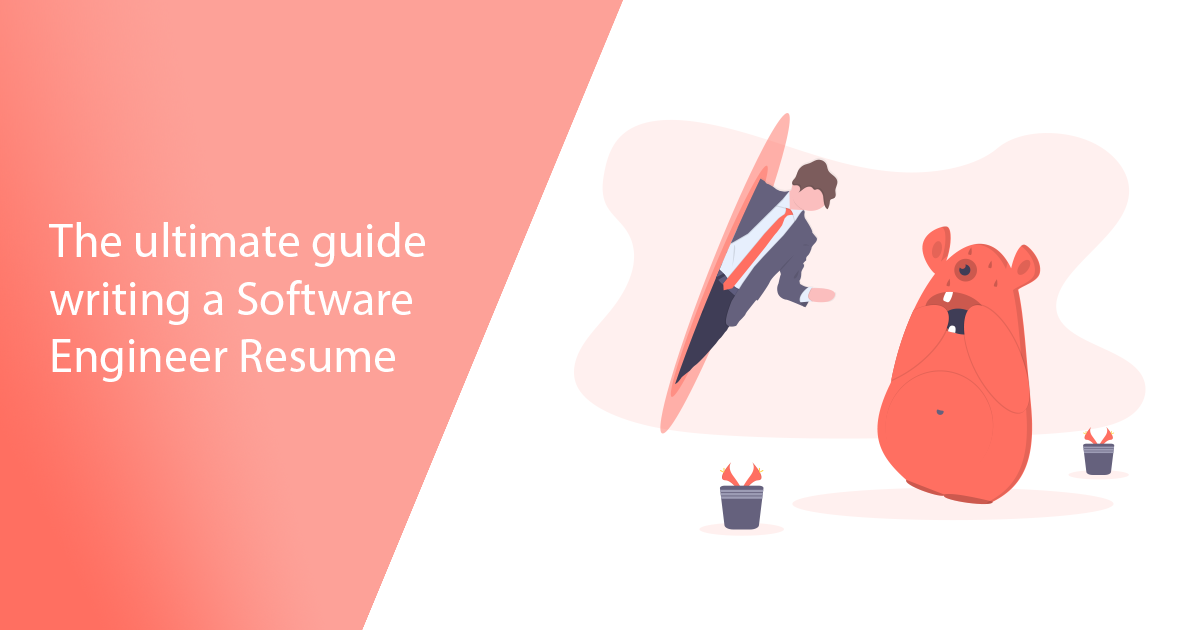
<style>
.page{position:relative;width:1200px;height:630px;background:#ffffff}
.page>*{position:absolute;margin:0}
.t1{font:48px "MyriadPro-Regular";color:#ffffff}
</style>
<div class="page">
<p class="t1" style="left:49px;top:222px;width:376px;height:160px">The ultimate guide <br>writing a Software<br>Engineer Resume</p>
</div>
